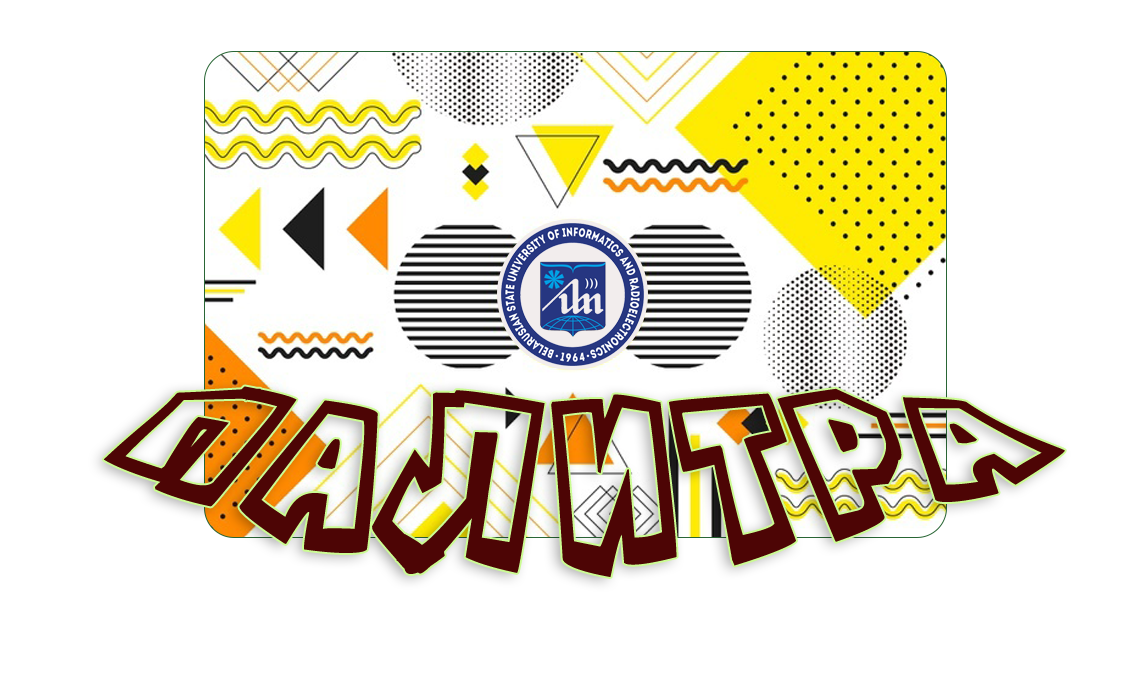
<style>
.page{position:relative;width:1140px;height:688px;background:#ffffff}
.page>*{position:absolute;margin:0}
.t1{font:150px "SuperMario3DWorld";color:#4d0505}
</style>
<div class="page">
<p class="t1" style="left:103px;top:386px;width:962px;height:191px">ПАЛИТРА</p>
</div>
